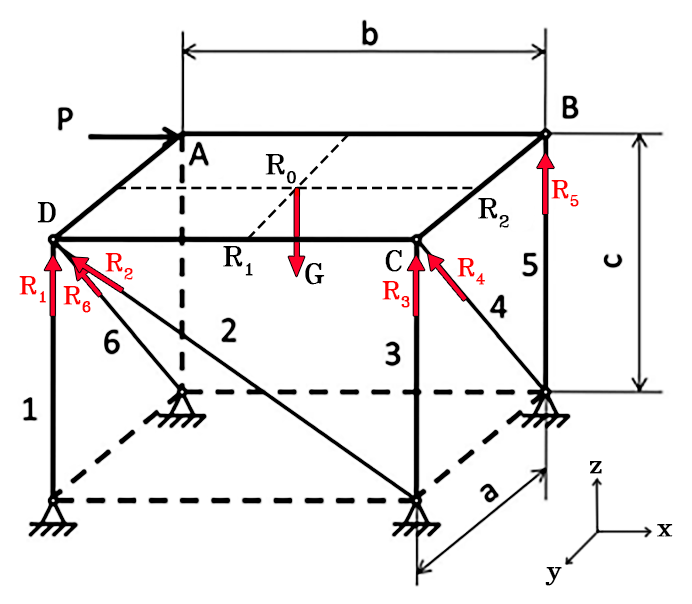
<style>
.page{position:relative;width:692px;height:604px;background:#ffffff}
.page>*{position:absolute;margin:0}
.t1{font:27px "SWRomnt";color:#000000;font-weight:bold}
.t2{font:24px "SWRomnt";color:#ff0000;font-weight:bold}
.t3{font:23.9px "SWRomnt";color:#000000;font-weight:bold}
</style>
<div class="page">
<p class="t1" style="left:265px;top:154px;width:31px;height:30px">R0</p>
<p class="t2" style="left:551px;top:180px;width:28px;height:27px">R5</p>
<p class="t1" style="left:478px;top:198px;width:31px;height:30px">R2</p>
<p class="t1" style="left:37px;top:202px;width:19px;height:21px">D</p>
<p class="t1" style="left:223px;top:246px;width:30px;height:30px">R1</p>
<p class="t2" style="left:105px;top:253px;width:28px;height:27px">R2</p>
<p class="t1" style="left:385px;top:250px;width:17px;height:22px">С</p>
<p class="t1" style="left:305px;top:263px;width:20px;height:22px">G</p>
<p class="t2" style="left:457px;top:258px;width:28px;height:27px">R4</p>
<p class="t2" style="left:19px;top:276px;width:27px;height:27px">R1</p>
<p class="t2" style="left:382px;top:281px;width:28px;height:27px">R3</p>
<p class="t2" style="left:63px;top:286px;width:28px;height:27px">R6</p>
<p class="t3" style="left:590px;top:461px;width:12px;height:13px">z</p>
<p class="t3" style="left:657px;top:524px;width:16px;height:13px">x</p>
<p class="t3" style="left:545px;top:567px;width:17px;height:19px">y</p>
</div>
